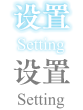
<style>
.page{position:relative;width:83px;height:110px;background:#ffffff}
.page>*{position:absolute;margin:0}
.t1{font:29.3px "FZFW-ZhuZiAOldMin-B--GB1-0";color:#ffffff}
.t2{font:29.3px "FZFW-ZhuZiAOldMin-B--GB1-0";color:#7f7f7f}
</style>
<div class="page">
<p class="t1" style="left:13px;top:3px;width:57px;height:27px">设置</p>
<p class="t2" style="left:13px;top:58px;width:57px;height:27px">设置</p>
</div>
